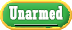
<style>
.page{position:relative;width:72px;height:30px}
.page>*{position:absolute;margin:0}
.t1{font:18px "Rockwell-Condensed";color:#ffffff;font-weight:bold}
</style>
<div class="page">
<p class="t1" style="left:9px;top:6px;width:54px;height:14px">Unarmed</p>
</div>
